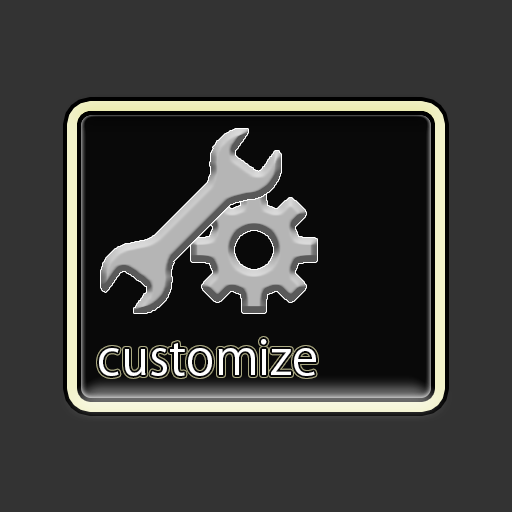
<style>
.page{position:relative;width:512px;height:512px;background:#333333}
.page>*{position:absolute;margin:0}
.t1{font:48px "KozGoPr6N-Regular";color:#ffffff}
</style>
<div class="page">
<p class="t1" style="left:99px;top:339px;width:217px;height:37px">customize</p>
</div>
